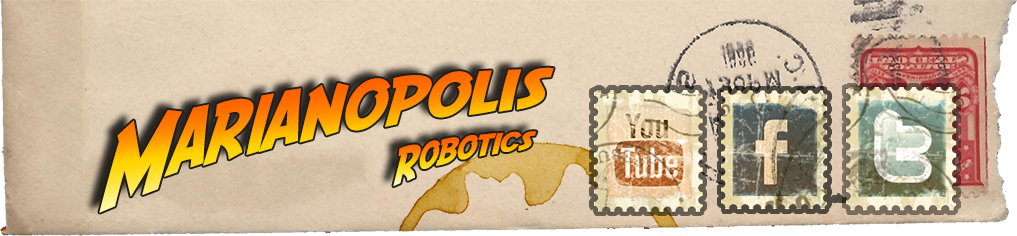
<style>
.page{position:relative;width:1017px;height:236px}
.page>*{position:absolute;margin:0}
.t1{font:73.2px "SFFedora";letter-spacing:-0.03em}
.t2{font:32.7px "SFFedora";letter-spacing:-0.03em}
</style>
<div class="page">
<p class="t1" style="left:99px;top:67px;width:455px;height:146px;rotate:-10deg">Marianopolis</p>
<p class="t2" style="left:393px;top:131px;width:144px;height:56px;rotate:-10deg">Robotics</p>
</div>
